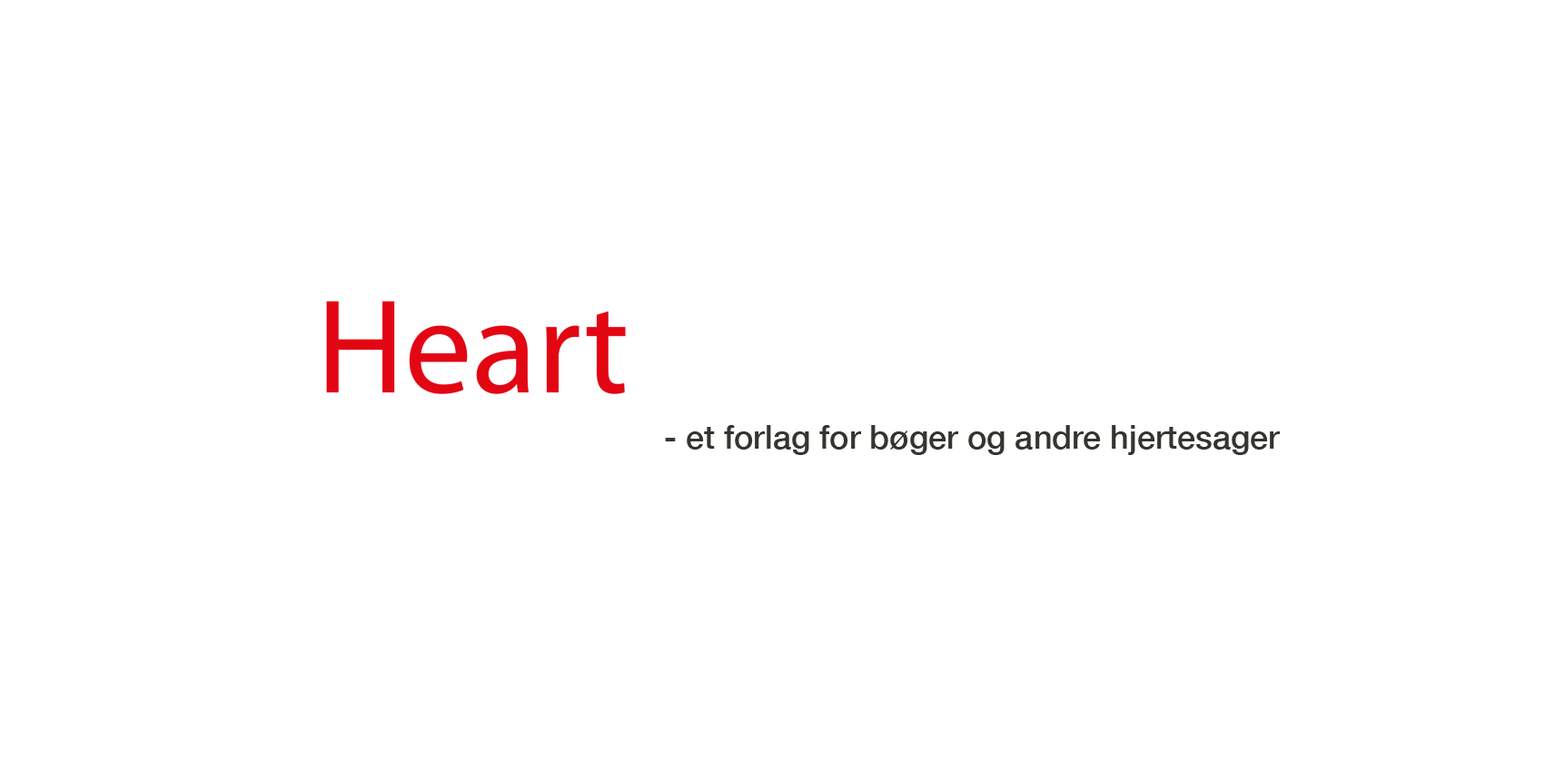
<style>
.page{position:relative;width:1545px;height:772px;background:#ffffff}
.page>*{position:absolute;margin:0}
.t1{font:32.7px "HelveticaNeue-Medium";color:#353530}
</style>
<div class="page">
<p class="t1" style="left:665px;top:425px;width:615px;height:30px">- et forlag for bøger og andre hjertesager</p>
</div>
